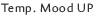
<style>
.page{position:relative;width:96px;height:16px;background:#ffffff}
.page>*{position:absolute;margin:0}
.t1{font:12px "Amira-Light";letter-spacing:0.075em;color:#333333}
</style>
<div class="page">
<p class="t1" style="left:1px;top:3px;width:92px;height:12px">Temp. Mood UP</p>
</div>
